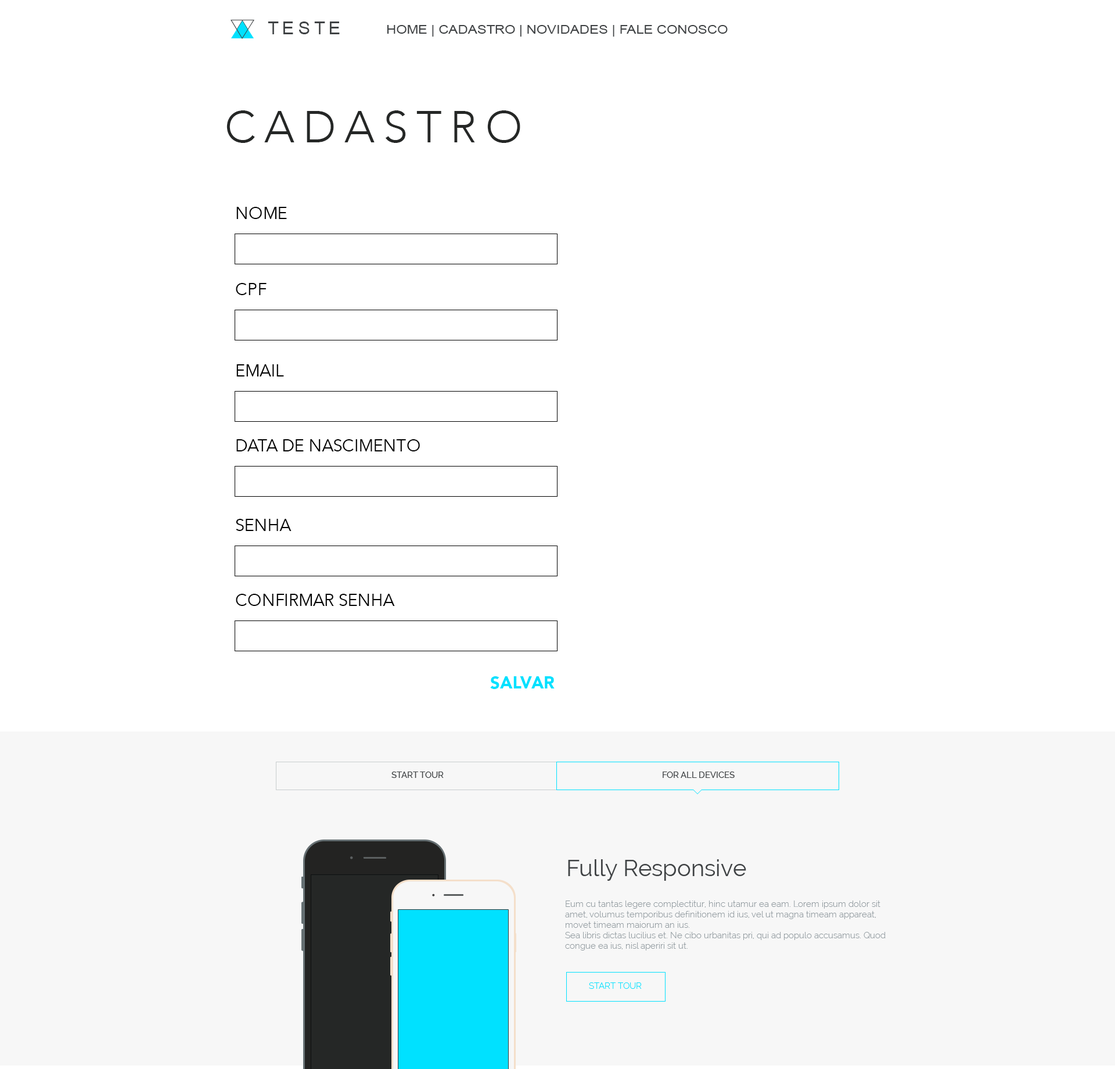
<style>
.page{position:relative;width:1115px;height:1069px;background:#ffffff}
.page>*{position:absolute;margin:0}
.t1{font:18.2px "ArialMT";letter-spacing:0.2em;color:#3f4244}
.t2{font:12.4px "ArialMT";color:#3f4244;scale:1.11 1}
.t3{font:44.1px "Avenir-Light";letter-spacing:0.2em;color:#252726}
.t4{font:16.7px "Avenir-Book";color:#000000}
.t5{font:16.7px "Avenir-Black";color:#00e1ff}
.t6{font:8.7px "Raleway-Medium";color:#3f4244}
.t7{font:23.2px "Raleway";color:#3f4244}
.t8{font:8.7px "Raleway-Light";color:#929ba0}
.t9{font:8.7px "Raleway-Light";color:#00e1ff}
</style>
<div class="page">
<p class="t1" style="left:268px;top:21px;width:72px;height:13px">TESTE</p>
<p class="t2" style="left:387px;top:25px;width:341px;height:12px">HOME | CADASTRO | NOVIDADES | FALE CONOSCO</p>
<p class="t3" style="left:227px;top:110px;width:294px;height:33px">CADASTRO</p>
<p class="t4" style="left:236px;top:207px;width:51px;height:12px">NOME</p>
<p class="t4" style="left:236px;top:283px;width:31px;height:12px">CPF</p>
<p class="t4" style="left:236px;top:364px;width:48px;height:12px">EMAIL</p>
<p class="t4" style="left:236px;top:439px;width:184px;height:12px">DATA DE NASCIMENTO</p>
<p class="t4" style="left:236px;top:519px;width:56px;height:12px">SENHA</p>
<p class="t4" style="left:236px;top:594px;width:159px;height:12px">CONFIRMAR SENHA</p>
<p class="t5" style="left:490px;top:676px;width:65px;height:13px">SALVAR</p>
<p class="t6" style="left:392px;top:772px;width:52px;height:6px">START TOUR</p>
<p class="t6" style="left:663px;top:772px;width:72px;height:6px">FOR ALL DEVICES</p>
<p class="t7" style="left:568px;top:859px;width:179px;height:22px">Fully Responsive</p>
<p class="t8" style="left:565px;top:901px;width:321px;height:49px">Eum cu tantas legere complectitur, hinc utamur ea eam. Lorem ipsum dolor sit amet, volumus temporibus definitionem id ius, vel ut magna timeam appareat, movet timeam maiorum an ius.<br>Sea libris dictas lucilius et. Ne cibo urbanitas pri, qui ad populo accusamus. Quod congue ea ius, nisl aperiri sit ut.</p>
<p class="t9" style="left:589px;top:982px;width:53px;height:7px">START TOUR</p>
</div>
